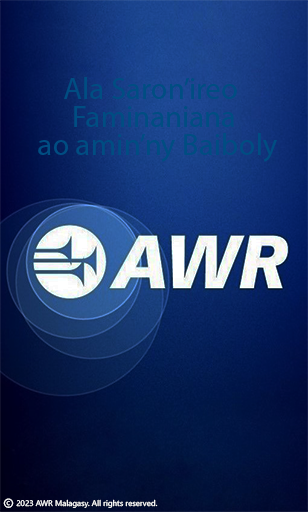
<style>
.page{position:relative;width:308px;height:512px}
.page>*{position:absolute;margin:0}
.t1{font:30.8px/28px "MyriadPro-Regular";color:#004d82}
</style>
<div class="page">
<p class="t1" style="left:38px;top:77px;width:239px;height:85px;text-align:center">Ala Saron’ireo <br>Faminaniana<br> ao amin’ny Baiboly</p>
</div>
